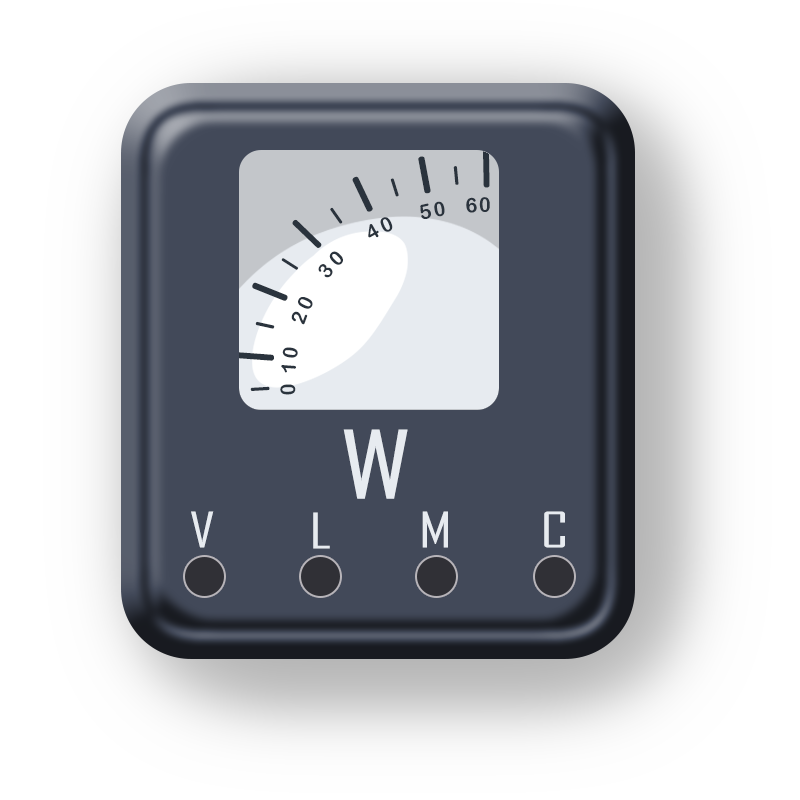
<style>
.page{position:relative;width:800px;height:800px}
.page>*{position:absolute;margin:0}
.t1{font:40px/53.5px "ArialRoundedMTBold";letter-spacing:0.28em;color:#2a333d;scale:1.44 1}
.t2{font:20px/53.5px "ArialRoundedMTBold";letter-spacing:0.28em;color:#2a333d;scale:1.44 1}
.t3{font:20.4px/53.5px "ArialRoundedMTBold";color:#2a333d}
.t4{font:90px "AgencyFB-Reg";letter-spacing:-0.02em;color:#e7ebf0;scale:1.44 1}
.t5{font:47px "AgencyFB-Reg";letter-spacing:-0.02em;color:#e7ebf0;scale:1.44 1}
</style>
<div class="page">
<p class="t1" style="left:236px;top:150px;width:254px;height:241px;text-align:right"><span class="t2">|</span>|<span class="t2">|</span>|<span class="t2">|</span>|<span class="t2">|</span>|<span class="t2">|</span>|<span class="t2">|</span>||<span class="t2">|</span>||<span class="t2">|</span>||<span class="t2">|</span>|<span class="t2">|</span>|<span class="t2">|</span>|</p>
<p class="t3" style="left:280px;top:197px;width:210px;height:198px">0 10   20   30    40    50   60</p>
<p class="t4" style="left:343px;top:429px;width:65px;height:70px">W</p>
<p class="t5" style="left:191px;top:511px;width:23px;height:37px">V</p>
<p class="t5" style="left:313px;top:512px;width:17px;height:37px">L</p>
<p class="t5" style="left:422px;top:511px;width:26px;height:37px">M</p>
<p class="t5" style="left:544px;top:511px;width:21px;height:37px">C</p>
</div>
